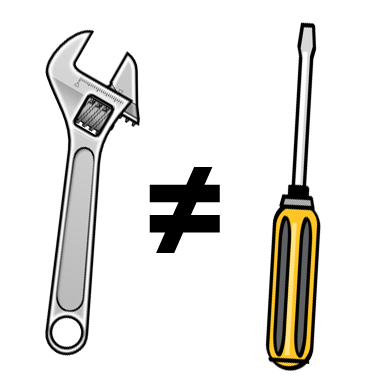
<style>
.page{position:relative;width:378px;height:387px;background:#ffffff}
.page>*{position:absolute;margin:0}
.t1{font:158.1px "PTSans-Bold";color:#000000}
</style>
<div class="page">
<p class="t1" style="left:149px;top:167px;width:71px;height:86px">≠</p>
</div>
